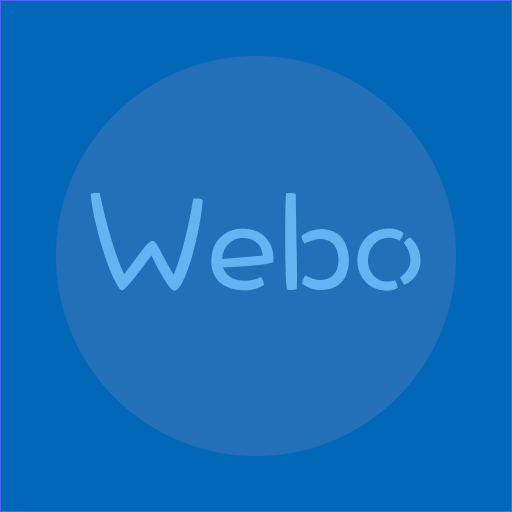
<style>
.page{position:relative;width:512px;height:512px;background:#0068b7}
.page>*{position:absolute;margin:0}
.t1{font:145px "DFWaWaSC-W5";color:#64b4f1}
</style>
<div class="page">
<p class="t1" style="left:90px;top:192px;width:331px;height:99px">Webo</p>
</div>
